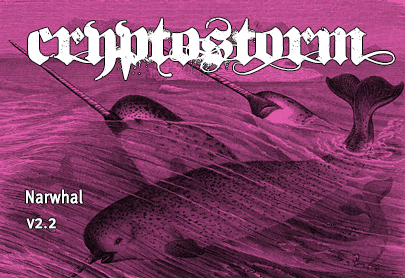
<style>
.page{position:relative;width:405px;height:278px}
.page>*{position:absolute;margin:0}
.t1{font:92px "Dirt2SoulStalker";color:#ffffff}
.t2{font:18px "MetaOT-CondNorm";color:#ffffff;font-weight:bold}
</style>
<div class="page">
<p class="t1" style="left:28px;top:17px;width:367px;height:64px">cRyptOStoRM</p>
<p class="t2" style="left:26px;top:189px;width:57px;height:15px">Narwhal</p>
<p class="t2" style="left:26px;top:218px;width:30px;height:11px">v2.2</p>
</div>
